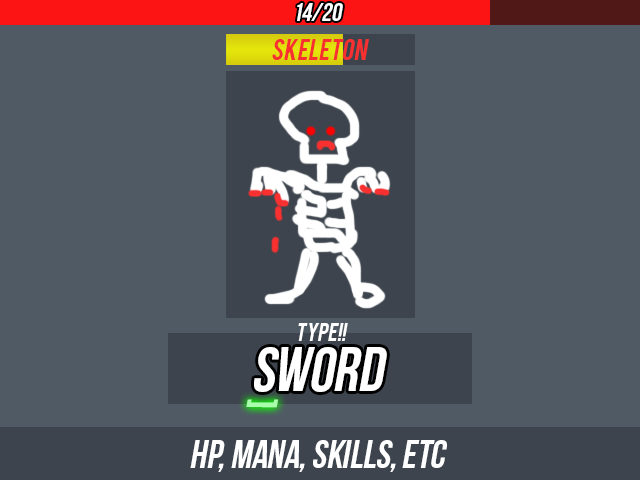
<style>
.page{position:relative;width:640px;height:480px;background:#505a64}
.page>*{position:absolute;margin:0}
.t1{font:25.6px "BebasNeue";letter-spacing:-0.009em;color:#ffffff;font-style:italic}
.t2{font:23.5px "Bebas";letter-spacing:-0.009em;color:#f93030;font-style:italic}
.t3{font:20px "Bebas";letter-spacing:-0.009em;color:#ffffff;font-style:italic}
.t4{font:62.5px "BebasNeue";letter-spacing:-0.009em;color:#ffffff;font-style:italic}
.t5{font:42.7px "BebasNeue";letter-spacing:-0.009em;color:#aaffac;font-style:italic}
</style>
<div class="page">
<p class="t1" style="left:297px;top:3px;width:46px;height:18px">14/20</p>
<p class="t2" style="left:272px;top:39px;width:97px;height:21px">skeleton</p>
<p class="t3" style="left:298px;top:323px;width:50px;height:18px">type!!</p>
<p class="t4" style="left:254px;top:347px;width:133px;height:45px">SWORD</p>
<p class="t5" style="left:246px;top:399px;width:32px;height:9px;rotate:-80deg">[</p>
</div>
